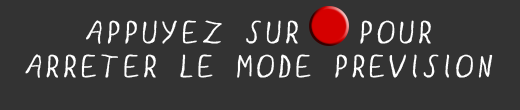
<style>
.page{position:relative;width:520px;height:110px;background:#333333}
.page>*{position:absolute;margin:0}
.t1{font:28px "GLOO";letter-spacing:0.01em;color:#ffffff;font-weight:bold}
</style>
<div class="page">
<p class="t1" style="left:25px;top:20px;width:468px;height:58px;text-align:center">APPUYEZ SUR   POUR <br>ARRETER LE MODE PREVISION</p>
</div>
